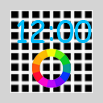
<style>
.page{position:relative;width:103px;height:103px;background:#d4d4d4}
.page>*{position:absolute;margin:0}
.t1{font:30px "ComicSansMS";color:#01bcfa}
</style>
<div class="page">
<p class="t1" style="left:17px;top:20px;width:75px;height:23px">12:00</p>
</div>
